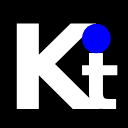
<style>
.page{position:relative;width:128px;height:128px;background:#000000}
.page>*{position:absolute;margin:0}
.t1{font:117.3px "DejaVuSans-Bold";color:#ffffff}
.t2{font:79.8px "DejaVuSans-Bold";color:#ffffff}
</style>
<div class="page">
<p class="t1" style="left:16px;top:23px;width:85px;height:86px">K</p>
<p class="t2" style="left:82px;top:52px;width:36px;height:57px">t</p>
</div>
